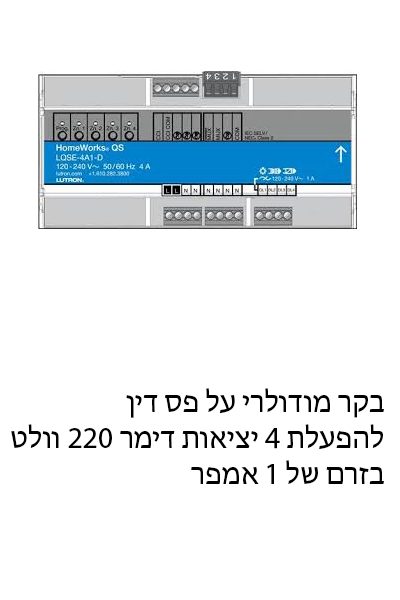
<style>
.page{position:relative;width:400px;height:600px;background:#ffffff}
.page>*{position:absolute;margin:0}
.t1{font:30px "MyriadHebrew-Regular";color:#000000}
</style>
<div class="page">
<p class="t1" style="left:11px;top:388px;width:373px;height:96px;text-align:right">בקר מודולרי על פס דין<br> להפעלת 4 יציאות דימר 220 וולט<br>בזרם של 1 אמפר</p>
</div>
